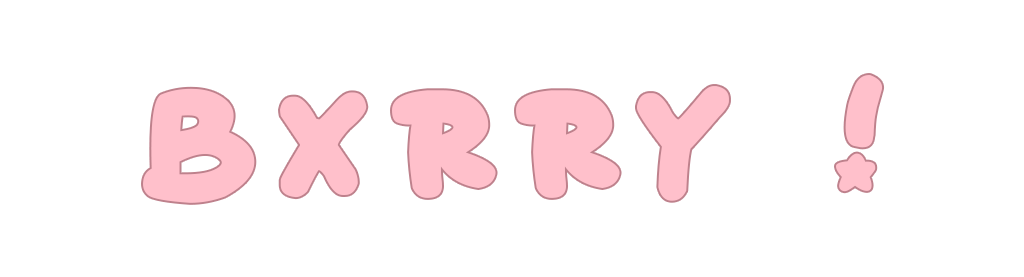
<style>
.page{position:relative;width:1024px;height:277px;background:#ffffff}
.page>*{position:absolute;margin:0}
.t1{font:125px "Starborn";letter-spacing:0.16em;color:#ffc0cb}
</style>
<div class="page">
<p class="t1" style="left:143px;top:75px;width:740px;height:128px">Bxrry !</p>
</div>
